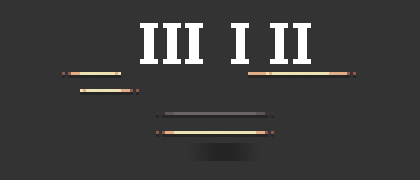
<style>
.page{position:relative;width:420px;height:180px;background:#333333}
.page>*{position:absolute;margin:0}
.t1{font:72.1px "InexpugnableExte";color:#ffffff}
.t2{font:73.2px "InexpugnableExte";color:#ffffff}
.t3{font:71.8px "InexpugnableExte";color:#ffffff}
</style>
<div class="page">
<p class="t1" style="left:140px;top:23px;width:63px;height:41px;text-align:center">III<br><br>I</p>
<p class="t2" style="left:231px;top:23px;width:18px;height:41px">I</p>
<p class="t3" style="left:270px;top:23px;width:41px;height:41px">II</p>
</div>
